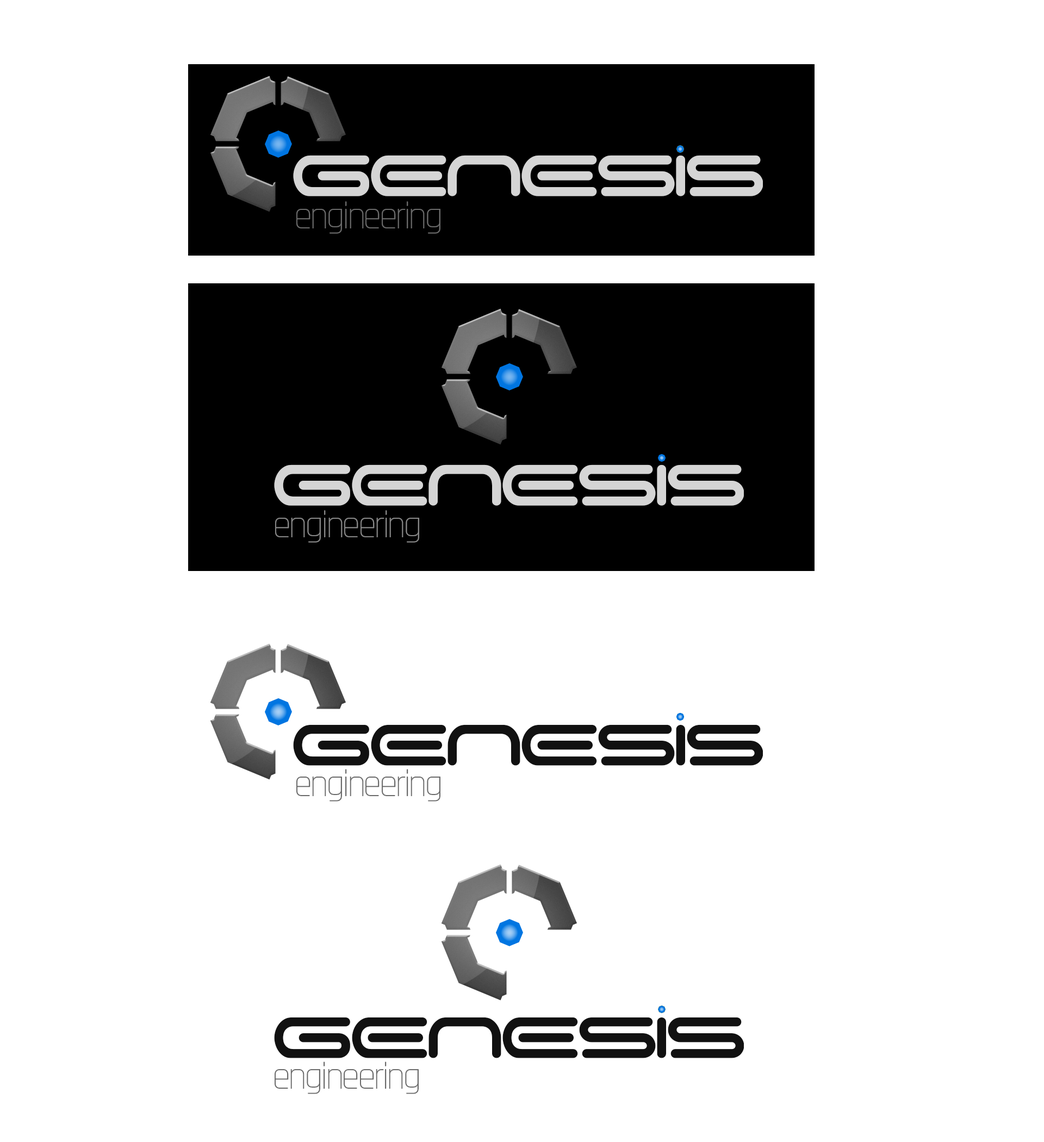
<style>
.page{position:relative;width:1044px;height:1142px;background:#ffffff}
.page>*{position:absolute;margin:0}
.t1{font:92.9px "SpaceAge";letter-spacing:-0.08em;color:#d5d5d5}
.t2{font:38.5px "Rajdhani-Light";letter-spacing:-0.08em;color:#6b6b6b}
.t3{font:38.5px "Rajdhani-Light";letter-spacing:-0.08em;color:#878787}
.t4{font:92.9px "SpaceAge";letter-spacing:-0.08em;color:#111111}
</style>
<div class="page">
<p class="t1" style="left:293px;top:155px;width:470px;height:41px">GENESIS</p>
<p class="t2" style="left:296px;top:201px;width:144px;height:33px">engineering</p>
<p class="t1" style="left:274px;top:464px;width:470px;height:42px">GENESIS</p>
<p class="t3" style="left:275px;top:510px;width:144px;height:33px">engineering</p>
<p class="t4" style="left:293px;top:724px;width:470px;height:42px">GENESIS</p>
<p class="t2" style="left:296px;top:769px;width:144px;height:33px">engineering</p>
<p class="t4" style="left:274px;top:1017px;width:470px;height:41px">GENESIS</p>
<p class="t2" style="left:275px;top:1062px;width:144px;height:32px">engineering</p>
</div>
